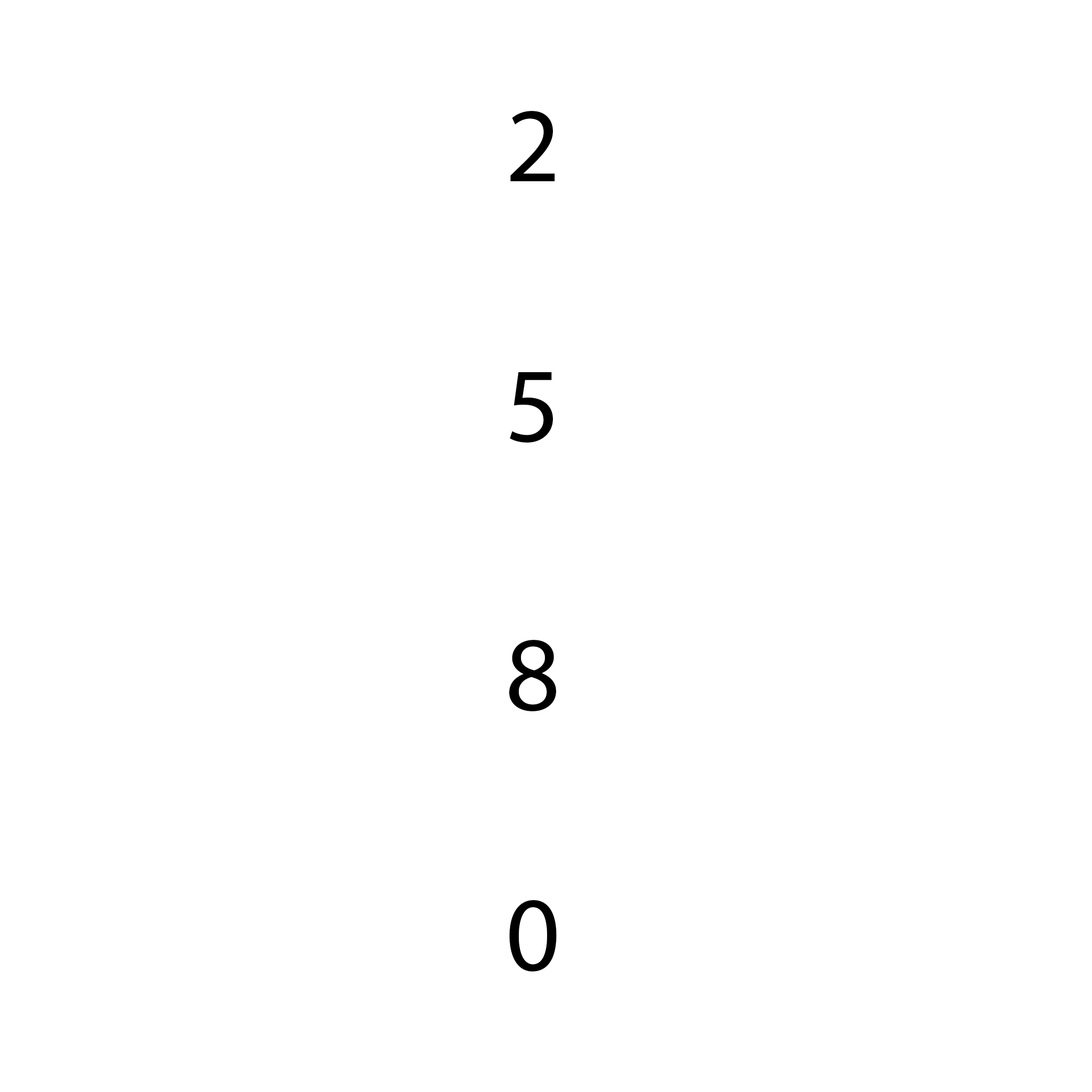
<style>
.page{position:relative;width:1092px;height:1092px;background:#ffffff}
.page>*{position:absolute;margin:0}
.t1{font:106.6px "MyriadPro-Regular";color:#010000}
</style>
<div class="page">
<p class="t1" style="left:510px;top:111px;width:45px;height:70px">2</p>
<p class="t1" style="left:510px;top:372px;width:43px;height:71px">5</p>
<p class="t1" style="left:509px;top:640px;width:47px;height:71px">8</p>
<p class="t1" style="left:509px;top:900px;width:48px;height:71px">0</p>
</div>
